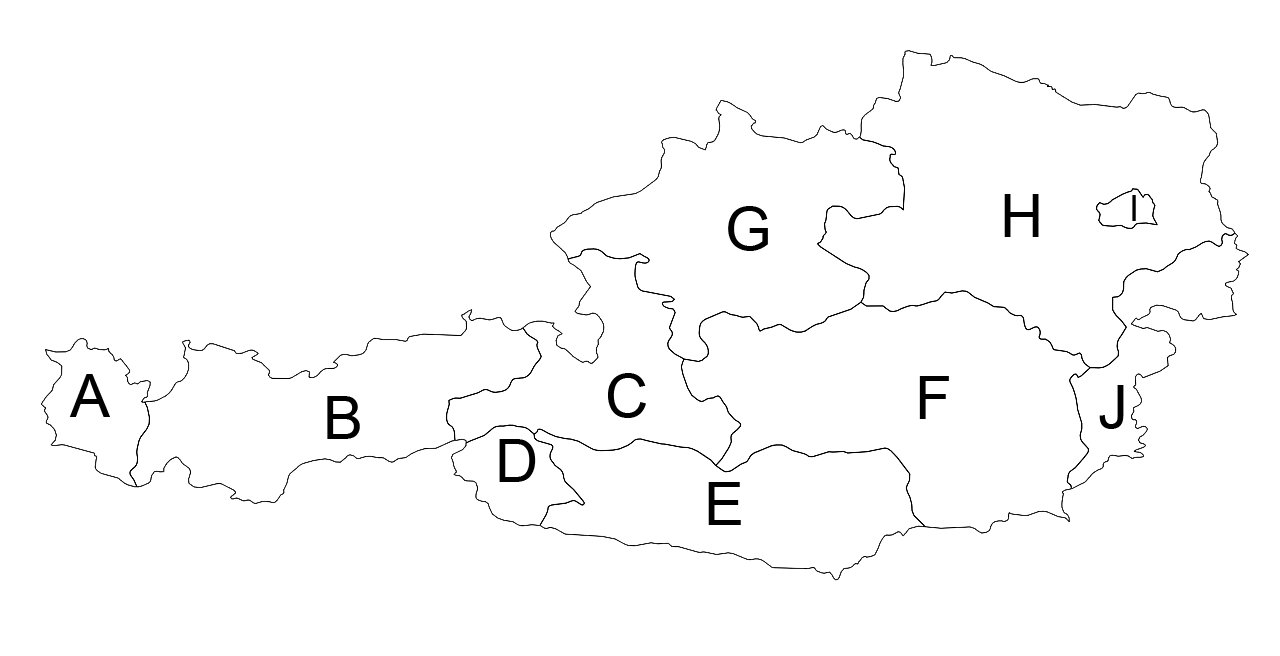
<style>
.page{position:relative;width:1280px;height:656px;background:#ffffff}
.page>*{position:absolute;margin:0}
.t1{font:60px "ArialMT";color:#000000}
.t2{font:36px "ArialMT";color:#000000}
.t3{font:60px "ArialMT";color:#010101}
</style>
<div class="page">
<p class="t1" style="left:1004px;top:194px;width:35px;height:43px">H</p>
<p class="t2" style="left:1132px;top:195px;width:4px;height:26px">I</p>
<p class="t1" style="left:728px;top:206px;width:40px;height:45px">G</p>
<p class="t3" style="left:69px;top:374px;width:41px;height:43px">A</p>
<p class="t1" style="left:608px;top:373px;width:38px;height:45px">C</p>
<p class="t1" style="left:919px;top:376px;width:30px;height:43px">F</p>
<p class="t1" style="left:1099px;top:385px;width:25px;height:44px">J</p>
<p class="t1" style="left:327px;top:396px;width:33px;height:43px">B</p>
<p class="t1" style="left:499px;top:439px;width:37px;height:43px">D</p>
<p class="t1" style="left:708px;top:482px;width:33px;height:43px">E</p>
</div>
